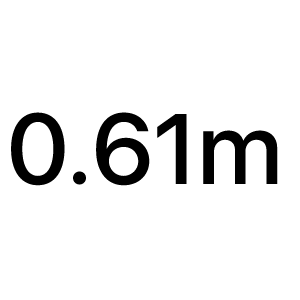
<style>
.page{position:relative;width:300px;height:300px;background:#ffffff}
.page>*{position:absolute;margin:0}
.t1{font:99px "SFUIDisplay-Medium";color:#000000}
</style>
<div class="page">
<p class="t1" style="left:11px;top:112px;width:267px;height:74px">0.61m</p>
</div>
